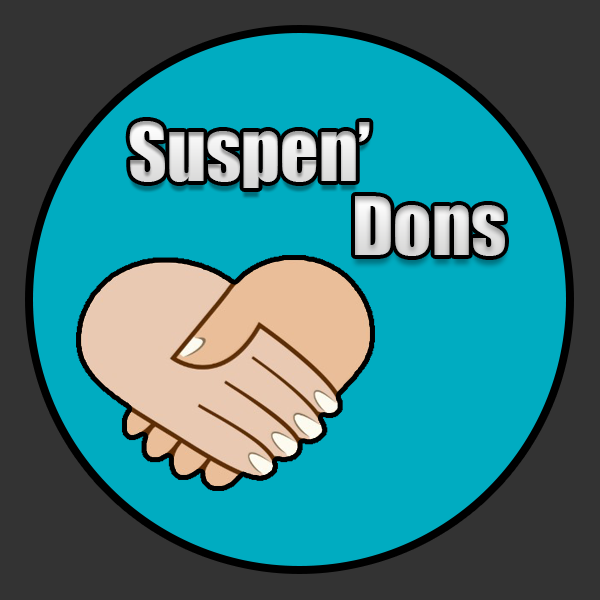
<style>
.page{position:relative;width:600px;height:600px;background:#00acc1}
.page>*{position:absolute;margin:0}
.t1{font:75px "Impact";color:#e2e2e2}
.t2{font:75px "Impact";color:#dbdbdb}
</style>
<div class="page">
<p class="t1" style="left:129px;top:121px;width:241px;height:67px">Suspen’</p>
<p class="t2" style="left:355px;top:196px;width:150px;height:60px">Dons</p>
</div>
